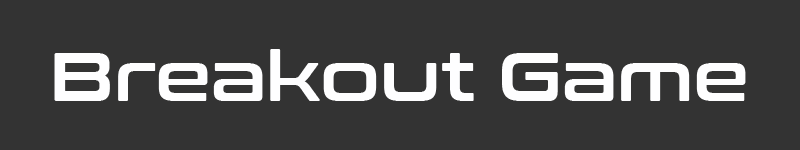
<style>
.page{position:relative;width:800px;height:150px;background:#333333}
.page>*{position:absolute;margin:0}
.t1{font:69.4px "ConthraxSb-Regular";color:#fefeff}
</style>
<div class="page">
<p class="t1" style="left:54px;top:49px;width:692px;height:52px">Breakout Game</p>
</div>
